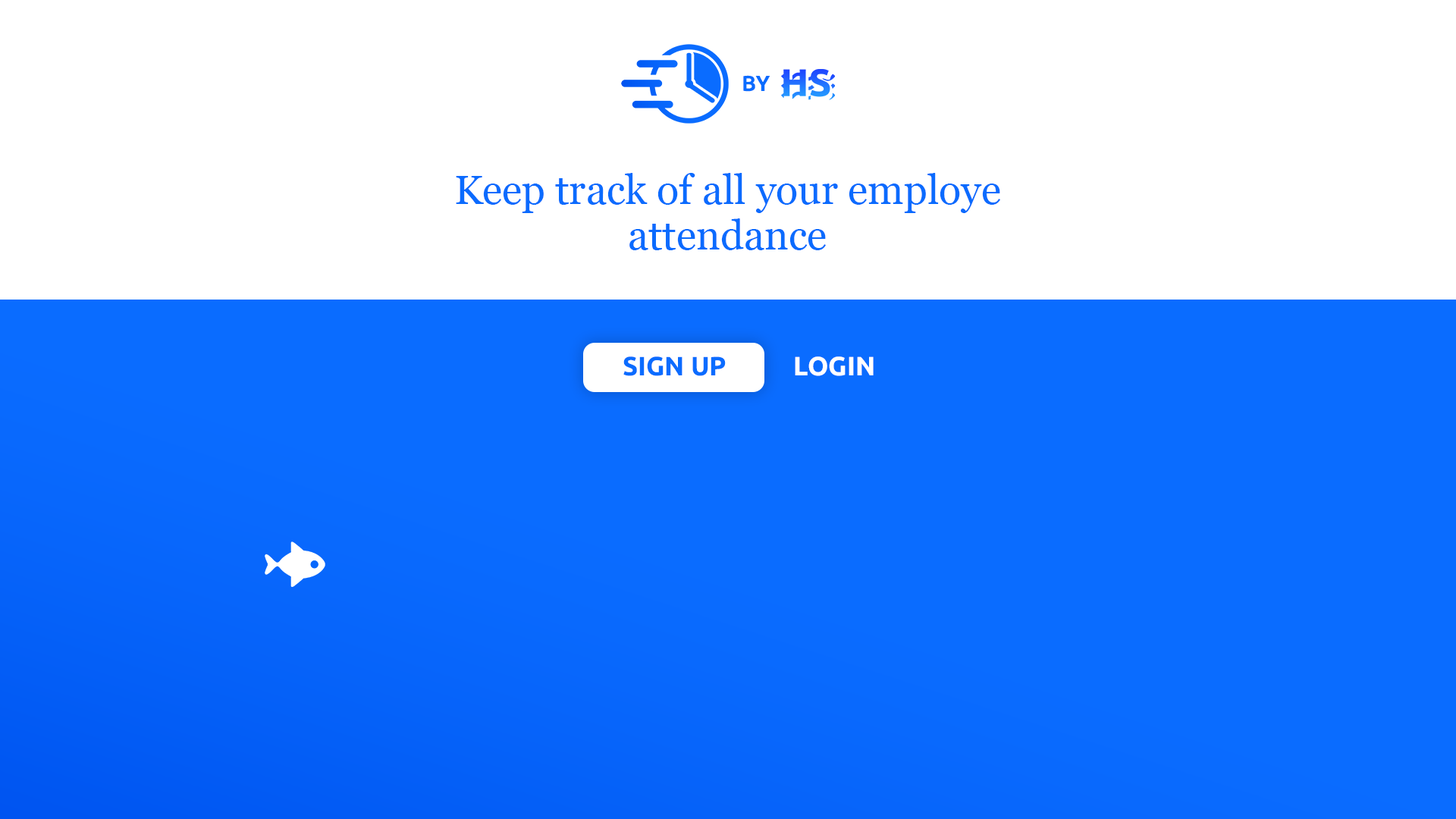
<style>
.page{position:relative;width:1456px;height:819px;background:#ffffff}
.page>*{position:absolute;margin:0}
.t1{font:21.7px "Ubuntu-Bold";color:#0a6cff}
.t2{font:40.9px/45.8px "Georgia";color:#0a6bfe}
.t3{font:26.5px "Ubuntu-Bold";color:#0a6cff}
.t4{font:26.5px "Ubuntu-Bold";color:#ffffff}
</style>
<div class="page">
<p class="t1" style="left:743px;top:75px;width:27px;height:17px">BY</p>
<p class="t2" style="left:456px;top:173px;width:544px;height:77px;text-align:center">Keep track of all your employe<br>attendance</p>
<p class="t3" style="left:623px;top:356px;width:103px;height:20px">SIGN UP</p>
<p class="t4" style="left:795px;top:356px;width:79px;height:20px">LOGIN</p>
</div>
